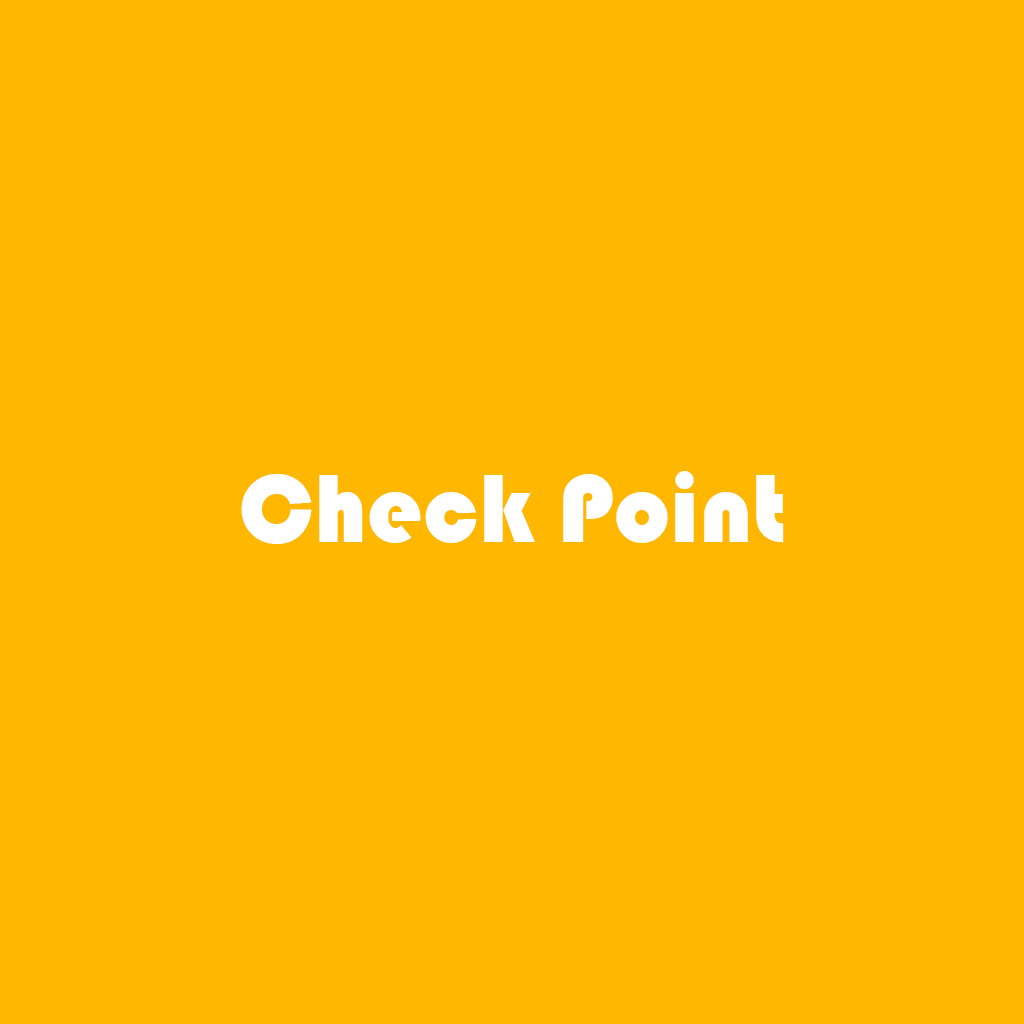
<style>
.page{position:relative;width:1024px;height:1024px;background:#ffb700}
.page>*{position:absolute;margin:0}
.t1{font:100px "Bauhaus93";color:#ffffff}
</style>
<div class="page">
<p class="t1" style="left:241px;top:471px;width:543px;height:73px">Check Point</p>
</div>
